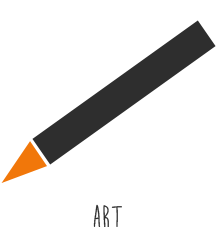
<style>
.page{position:relative;width:216px;height:227px;background:#ffffff}
.page>*{position:absolute;margin:0}
.t1{font:30px "Bite___Bullet";letter-spacing:0.01em;color:#2e2e2e}
</style>
<div class="page">
<p class="t1" style="left:93px;top:204px;width:29px;height:24px">art</p>
</div>
